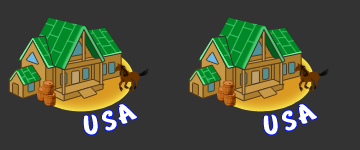
<style>
.page{position:relative;width:360px;height:150px;background:#333333}
.page>*{position:absolute;margin:0}
.t1{font:30px "BrushType-Bold";letter-spacing:0.12em;color:#ffffff}
</style>
<div class="page">
<p class="t1" style="left:83px;top:104px;width:54px;height:31px;rotate:-20deg">USA</p>
<p class="t1" style="left:263px;top:104px;width:54px;height:31px;rotate:-20deg">USA</p>
</div>
